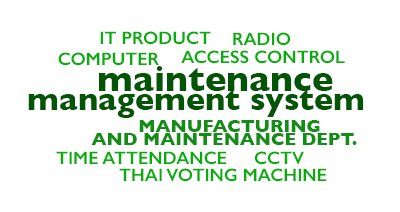
<style>
.page{position:relative;width:400px;height:212px;background:#ffffff}
.page>*{position:absolute;margin:0}
.t1{font:18px "GillSans-SemiBold";color:#07ae0b}
.t2{font:36px "GillSans-Bold";color:#025504}
.t3{font:32px "GillSans-Bold";color:#025504}
.t4{font:18px "GillSans-Bold";color:#128d15}
</style>
<div class="page">
<p class="t1" style="left:100px;top:31px;width:111px;height:14px">IT PRODUCT</p>
<p class="t1" style="left:233px;top:32px;width:58px;height:14px">RADIO</p>
<p class="t1" style="left:58px;top:52px;width:101px;height:14px">COMPUTER</p>
<p class="t1" style="left:181px;top:50px;width:164px;height:14px">ACCESS CONTROL</p>
<p class="t2" style="left:99px;top:66px;width:234px;height:25px">maintenance</p>
<p class="t3" style="left:28px;top:89px;width:336px;height:29px">management system</p>
<p class="t4" style="left:139px;top:120px;width:181px;height:12px">MANUFACTURING</p>
<p class="t4" style="left:91px;top:133px;width:266px;height:12px">AND MAINTENANCE DEPT.</p>
<p class="t1" style="left:56px;top:151px;width:171px;height:14px">TIME ATTENDANCE</p>
<p class="t1" style="left:254px;top:151px;width:50px;height:14px">CCTV</p>
<p class="t1" style="left:119px;top:168px;width:208px;height:14px">THAI VOTING MACHINE</p>
</div>
